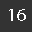
<style>
.page{position:relative;width:32px;height:32px;background:#333333}
.page>*{position:absolute;margin:0}
.t1{font:17.8px "MyriadPro-Regular";color:#ffffff;scale:1.12 1}
</style>
<div class="page">
<p class="t1" style="left:9px;top:9px;width:17px;height:12px">16</p>
</div>
